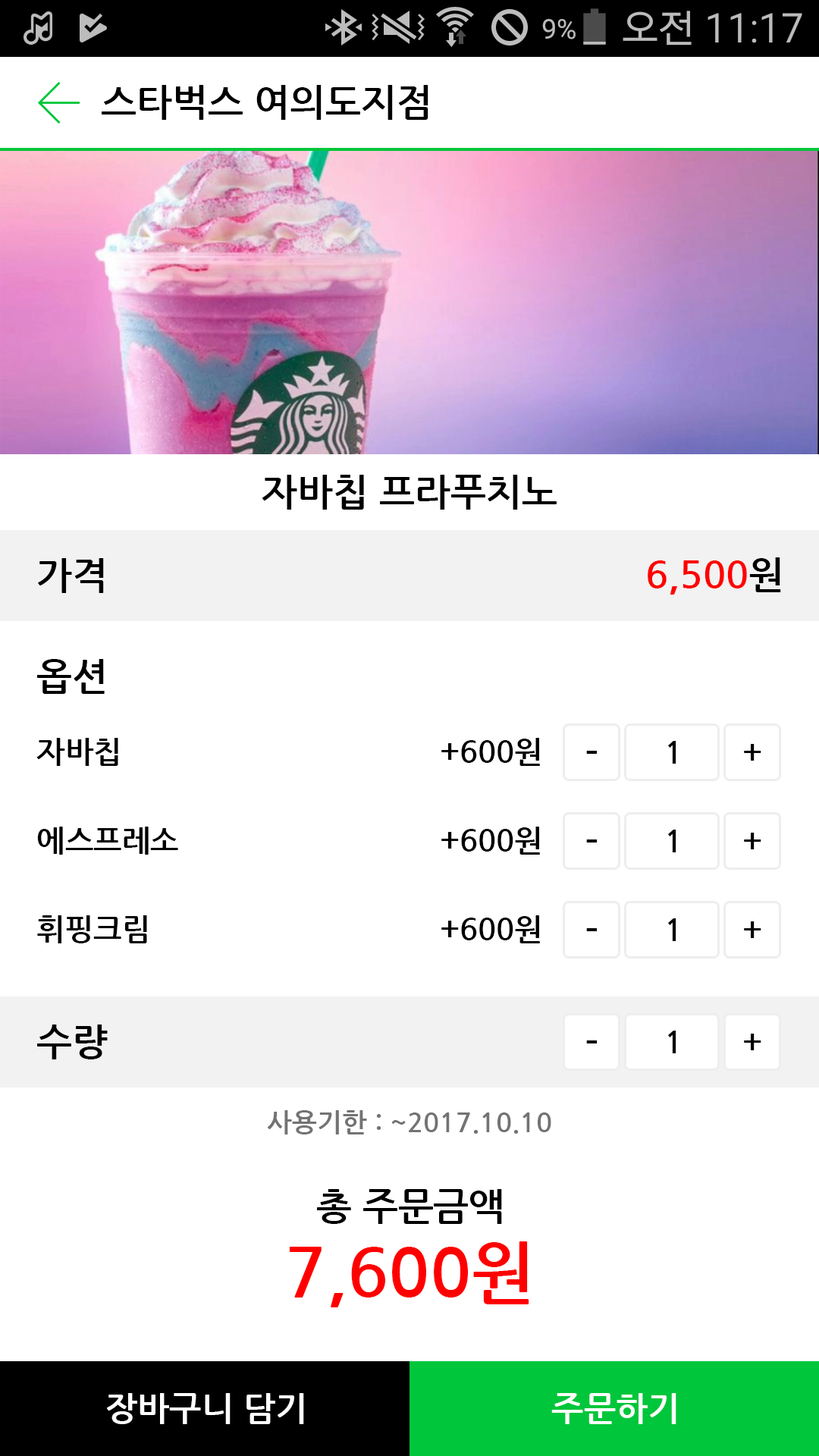
<style>
.page{position:relative;width:819px;height:1456px;background:#ffffff}
.page>*{position:absolute;margin:0}
.t1{font:37.9px "NanumGothicBold";color:#000000}
.t2{font:37.9px "NanumGothicBold";color:#ff0000}
.t3{font:30.3px "NanumGothicBold";color:#000000}
.t4{font:26.5px "NanumGothicBold";color:#737373}
.t5{font:68.2px "NanumGothicBold";color:#ff0000}
.t6{font:34.1px "NanumGothicBold";color:#ffffff}
</style>
<div class="page">
<p class="t1" style="left:102px;top:85px;width:326px;height:35px">스타벅스 여의도지점</p>
<p class="t1" style="left:262px;top:475px;width:295px;height:35px">자바칩 프라푸치노</p>
<p class="t2" style="left:648px;top:557px;width:133px;height:38px">6,500<span class="t1">원</span></p>
<p class="t1" style="left:38px;top:558px;width:66px;height:35px">가격</p>
<p class="t1" style="left:37px;top:659px;width:68px;height:35px">옵션</p>
<p class="t3" style="left:36px;top:738px;width:82px;height:28px">자바칩</p>
<p class="t3" style="left:441px;top:738px;width:99px;height:28px">+600원</p>
<p class="t3" style="left:668px;top:741px;width:8px;height:23px">1</p>
<p class="t3" style="left:744px;top:744px;width:17px;height:17px">+</p>
<p class="t1" style="left:586px;top:751px;width:11px;height:3px">-</p>
<p class="t3" style="left:37px;top:827px;width:141px;height:28px">에스프레소</p>
<p class="t3" style="left:441px;top:827px;width:99px;height:28px">+600원</p>
<p class="t3" style="left:668px;top:830px;width:8px;height:22px">1</p>
<p class="t3" style="left:744px;top:833px;width:17px;height:16px">+</p>
<p class="t1" style="left:586px;top:839px;width:11px;height:3px">-</p>
<p class="t3" style="left:37px;top:915px;width:110px;height:28px">휘핑크림</p>
<p class="t3" style="left:441px;top:915px;width:99px;height:28px">+600원</p>
<p class="t1" style="left:586px;top:928px;width:11px;height:3px">-</p>
<p class="t3" style="left:668px;top:918px;width:8px;height:23px">1</p>
<p class="t3" style="left:744px;top:921px;width:17px;height:17px">+</p>
<p class="t1" style="left:37px;top:1024px;width:71px;height:35px">수량</p>
<p class="t3" style="left:668px;top:1031px;width:8px;height:22px">1</p>
<p class="t3" style="left:744px;top:1034px;width:17px;height:16px">+</p>
<p class="t1" style="left:586px;top:1040px;width:11px;height:3px">-</p>
<p class="t4" style="left:267px;top:1110px;width:284px;height:24px">사용기한 : ~2017.10.10</p>
<p class="t1" style="left:317px;top:1189px;width:185px;height:35px">총 주문금액</p>
<p class="t5" style="left:289px;top:1241px;width:240px;height:66px">7,600원</p>
<p class="t6" style="left:107px;top:1393px;width:197px;height:31px">장바구니 담기</p>
<p class="t6" style="left:551px;top:1393px;width:125px;height:31px">주문하기</p>
</div>
